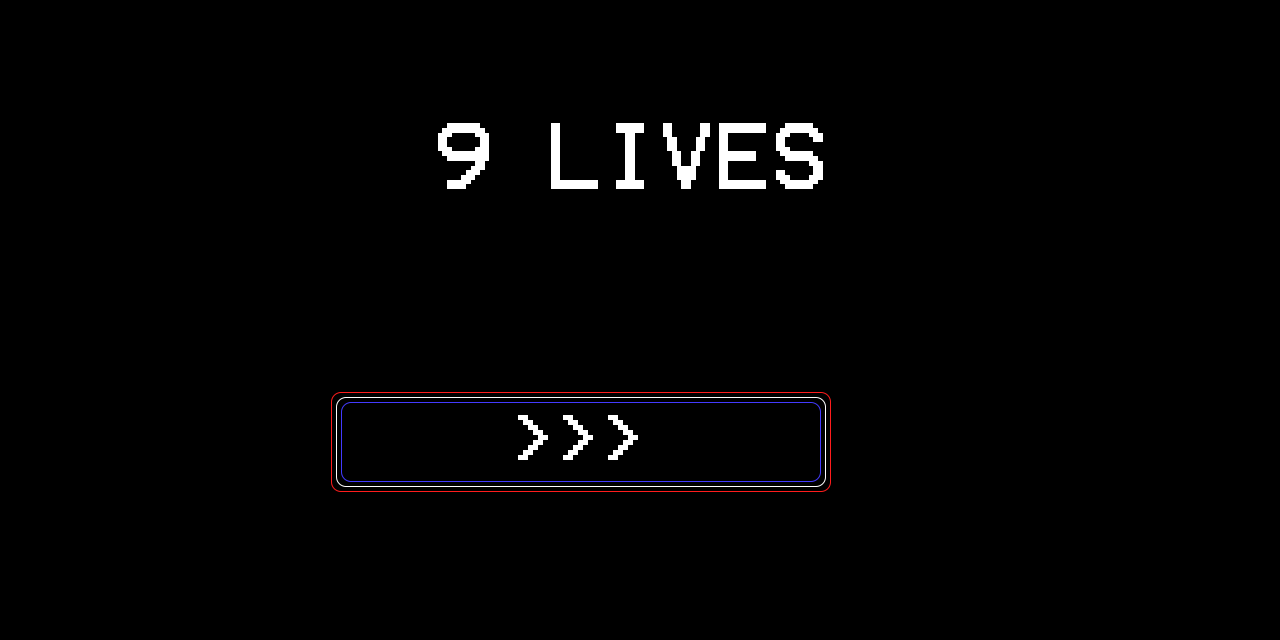
<style>
.page{position:relative;width:1280px;height:640px;background:#000000}
.page>*{position:absolute;margin:0}
.t1{font:75px "Terminal";color:#ffffff}
.t2{font:60px "Terminal";color:#ffffff}
</style>
<div class="page">
<p class="t1" style="left:438px;top:123px;width:385px;height:66px">9 LIVES</p>
<p class="t2" style="left:518px;top:415px;width:120px;height:45px">&gt;&gt;&gt;</p>
</div>
